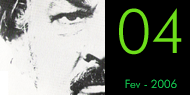
<style>
.page{position:relative;width:190px;height:95px;background:#000000}
.page>*{position:absolute;margin:0}
.t1{font:61.9px "FuturaBT-Light";color:#6dde1a}
.t2{font:11.4px "FuturaBT-Light";color:#11b748}
</style>
<div class="page">
<p class="t1" style="left:119px;top:8px;width:63px;height:47px">04</p>
<p class="t2" style="left:125px;top:79px;width:52px;height:9px">Fev - 2006</p>
</div>
